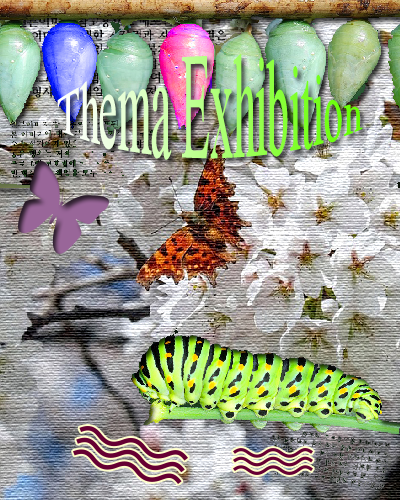
<style>
.page{position:relative;width:400px;height:500px}
.page>*{position:absolute;margin:0}
.t1{font:42px/30px "TimesNewRomanPSMT"}
</style>
<div class="page">
<p class="t1" style="left:57px;top:54px;width:306px;height:106px">Thema Exhibition</p>
</div>
